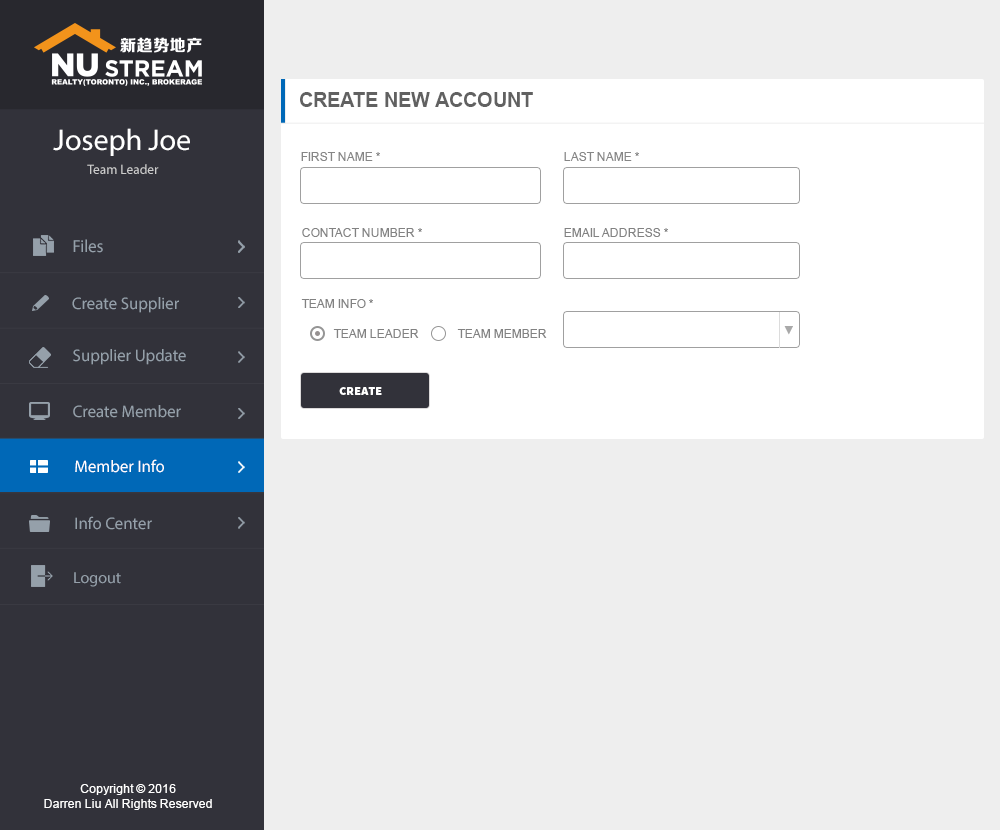
<style>
.page{position:relative;width:1000px;height:830px;background:#eeeeee}
.page>*{position:absolute;margin:0}
.t1{font:20px "Arial-BoldMT";color:#616161}
.t2{font:30px "MyriadPro-Regular";color:#ffffff}
.t3{font:12px "ArialMT";color:#868686}
.t4{font:13.4px "MyriadPro-Regular";color:#cccccc}
.t5{font:12px "ArialMT";color:#828282}
.t6{font:17.6px "MyriadPro-Regular";color:#95a0aa;scale:0.96 1}
.t7{font:16.8px "MyriadPro-Regular";color:#95a0aa}
.t8{font:10px "AdobeHeitiStd-Regular";color:#a9a9a9}
.t9{font:12px "SourceSansPro-Black";color:#ffffff}
.t10{font:16.8px "MyriadPro-Regular";color:#ffffff}
.t11{font:16px "MyriadPro-Regular";color:#95a0aa}
.t12{font:12px "ArialMT";color:#ffffff}
</style>
<div class="page">
<p class="t1" style="left:300px;top:92px;width:233px;height:15px">CREATE NEW ACCOUNT</p>
<p class="t2" style="left:53px;top:128px;width:137px;height:28px">Joseph Joe</p>
<p class="t3" style="left:301px;top:152px;width:79px;height:9px">FIRST NAME *</p>
<p class="t3" style="left:564px;top:152px;width:75px;height:9px">LAST NAME *</p>
<p class="t4" style="left:87px;top:164px;width:72px;height:10px">Team Leader</p>
<p class="t5" style="left:302px;top:228px;width:120px;height:9px">CONTACT NUMBER *</p>
<p class="t5" style="left:564px;top:228px;width:104px;height:9px">EMAIL ADDRESS *</p>
<p class="t6" style="left:73px;top:239px;width:30px;height:14px">Files</p>
<p class="t7" style="left:72px;top:297px;width:107px;height:16px">Create Supplier</p>
<p class="t5" style="left:301px;top:299px;width:72px;height:9px">TEAM INFO *</p>
<p class="t5" style="left:333px;top:329px;width:86px;height:9px">TEAM LEADER</p>
<p class="t5" style="left:457px;top:329px;width:90px;height:9px">TEAM MEMBER</p>
<p class="t8" style="left:784px;top:326px;width:9px;height:9px">▼</p>
<p class="t7" style="left:73px;top:349px;width:113px;height:16px">Supplier Update</p>
<p class="t9" style="left:339px;top:387px;width:43px;height:8px">CREATE</p>
<p class="t7" style="left:73px;top:405px;width:108px;height:13px">Create Member</p>
<p class="t10" style="left:75px;top:459px;width:89px;height:14px">Member Info</p>
<p class="t7" style="left:75px;top:516px;width:77px;height:14px">Info Center</p>
<p class="t11" style="left:74px;top:572px;width:47px;height:15px">Logout</p>
<p class="t12" style="left:44px;top:784px;width:168px;height:26px;text-align:center">Copyright © 2016<br>Darren Liu All Rights Reserved</p>
</div>
